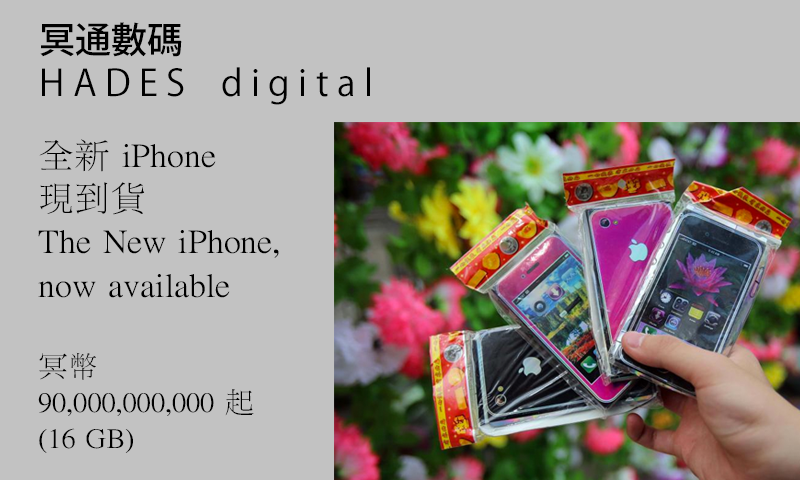
<style>
.page{position:relative;width:800px;height:480px;background:#c2c2c2}
.page>*{position:absolute;margin:0}
.t1{font:36px "KozGoPr6N-Regular";color:#000000}
.t2{font:36px "KozGoPr6N-Medium";color:#000000}
.t3{font:36px "LiSungLight";color:#000000}
.t4{font:30px "LiSungLight";color:#000000}
</style>
<div class="page">
<p class="t1" style="left:40px;top:22px;width:330px;height:83px"><span class="t2">冥通數碼</span>  <br>H A D E S d i g i t a l</p>
<p class="t3" style="left:38px;top:139px;width:241px;height:314px">全新 iPhone<br>現到貨<br>The New iPhone, <br>now available<br><br><span class="t4">冥幣 <br>90,000,000,000 起<br>(16 GB)</span></p>
</div>
